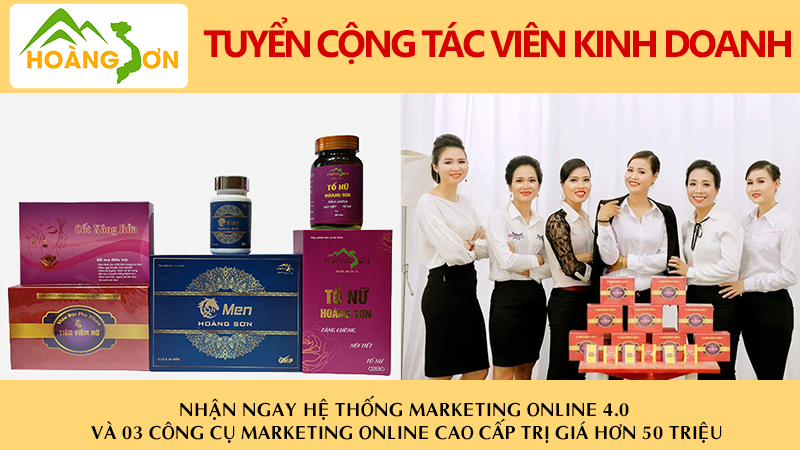
<style>
.page{position:relative;width:800px;height:450px;background:#ffd673}
.page>*{position:absolute;margin:0}
.t1{font:38px "SVN-SegoeUIBold";letter-spacing:-0.08em;color:#d70000;text-transform:uppercase}
.t2{font:19px "SVN-Aptimabold";color:#000000;text-transform:uppercase}
</style>
<div class="page">
<p class="t1" style="left:203px;top:17px;width:588px;height:48px">TUYỂN CỘNG TÁC VIÊN KINH DOANH</p>
<p class="t2" style="left:91px;top:395px;width:631px;height:48px;text-align:center">NHẬN NGAY HỆ THỐNG MARKETING ONLINE 4.0 <br>VÀ 03 CÔNG CỤ MARKETING ONLINE CAO CẤP TRỊ GIÁ HƠN 50 TRIỆU</p>
</div>
